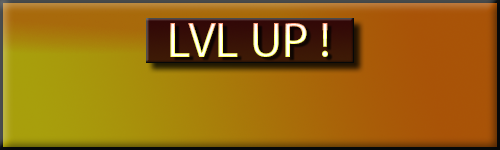
<style>
.page{position:relative;width:500px;height:150px}
.page>*{position:absolute;margin:0}
.t1{font:50px "MyriadPro-Regular"}
</style>
<div class="page">
<p class="t1" style="left:170px;top:23px;width:158px;height:34px">LVL UP !</p>
</div>
